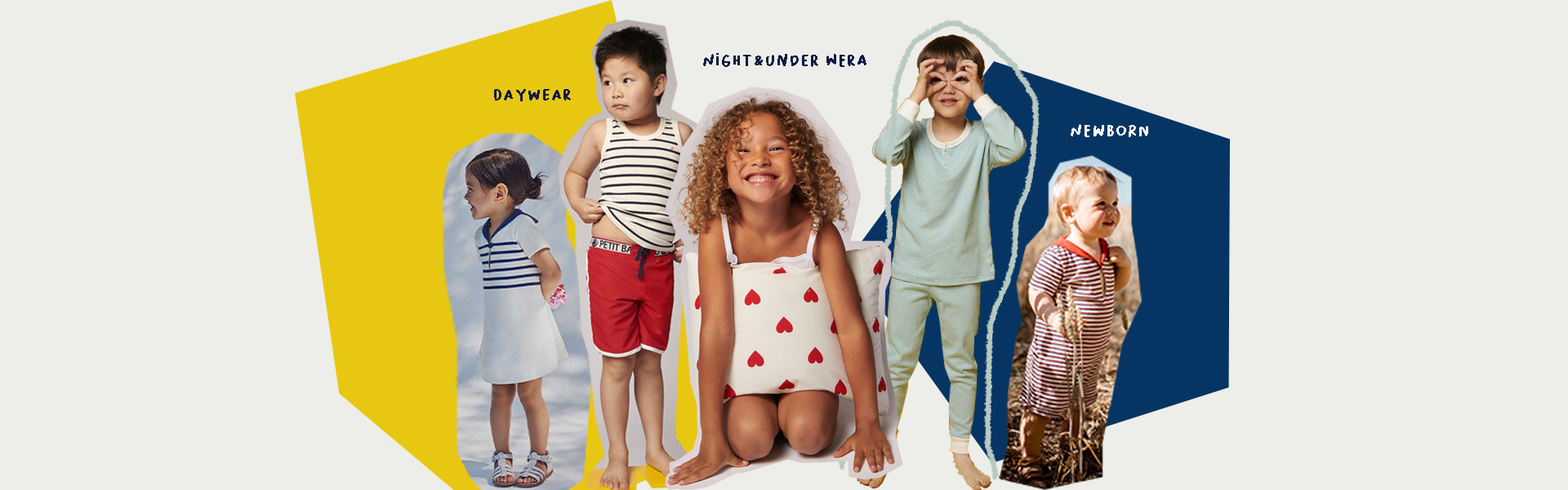
<style>
.page{position:relative;width:1568px;height:490px;background:#edeee9}
.page>*{position:absolute;margin:0}
.t1{font:16.3px "BaksoSapi";letter-spacing:0.025em;color:#0a1a43}
.t2{font:16.3px "BaksoSapi";letter-spacing:0.025em;color:#ffffff}
</style>
<div class="page">
<p class="t1" style="left:703px;top:53px;width:163px;height:14px">night&amp;under wera</p>
<p class="t1" style="left:494px;top:89px;width:77px;height:12px">daywear</p>
<p class="t2" style="left:1071px;top:124px;width:77px;height:13px">newborn</p>
</div>
